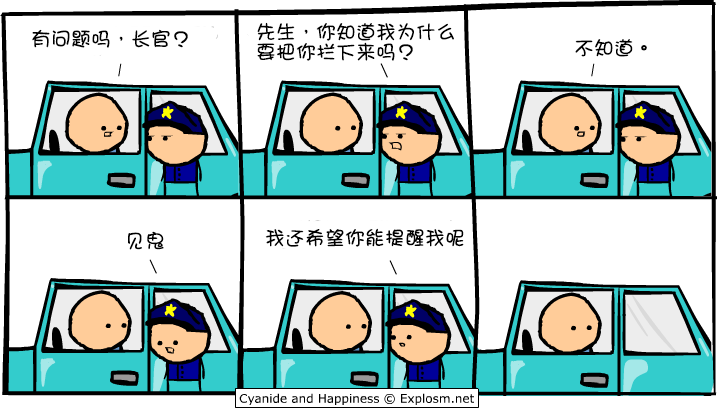
<style>
.page{position:relative;width:718px;height:410px;background:#ffffff}
.page>*{position:absolute;margin:0}
.t1{font:20px "DFGirl";color:#000000}
.t2{font:20px/20px "DFGirl";color:#000000}
</style>
<div class="page">
<p class="t1" style="left:32px;top:29px;width:156px;height:19px">有问题吗，长官？</p>
<p class="t2" style="left:257px;top:22px;width:197px;height:39px">先生，你知道我为什么<br>要把你拦下来吗？</p>
<p class="t1" style="left:575px;top:39px;width:72px;height:18px">不知道。</p>
<p class="t1" style="left:128px;top:231px;width:36px;height:19px">见鬼</p>
<p class="t1" style="left:265px;top:228px;width:199px;height:19px">我还希望你能提醒我呢</p>
</div>
